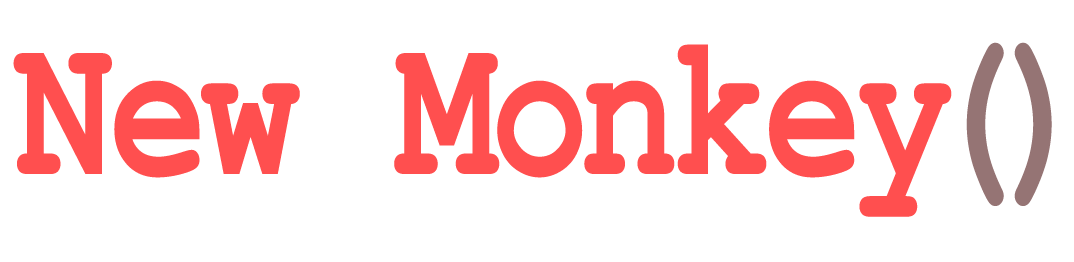
<style>
.page{position:relative;width:1074px;height:262px;background:#ffffff}
.page>*{position:absolute;margin:0}
.t1{font:204.2px "CourierNewPS-BoldMT";color:#ff4f4f;scale:0.8 1}
.t2{font:204.2px "CourierNewPS-BoldMT";color:#957474;scale:0.8 1}
</style>
<div class="page">
<p class="t1" style="left:13px;top:42px;width:1039px;height:175px">New Monkey<span class="t2">()</span></p>
</div>
